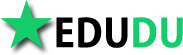
<style>
.page{position:relative;width:183px;height:55px;background:#ffffff}
.page>*{position:absolute;margin:0}
.t1{font:38.2px "KozGoPr6N-Bold";color:#000001;font-weight:bold}
.t2{font:38.2px "KozGoPr6N-Bold";color:#12cd6a;font-weight:bold}
</style>
<div class="page">
<p class="t1" style="left:56px;top:17px;width:127px;height:31px">EDU<span class="t2">DU</span></p>
</div>
